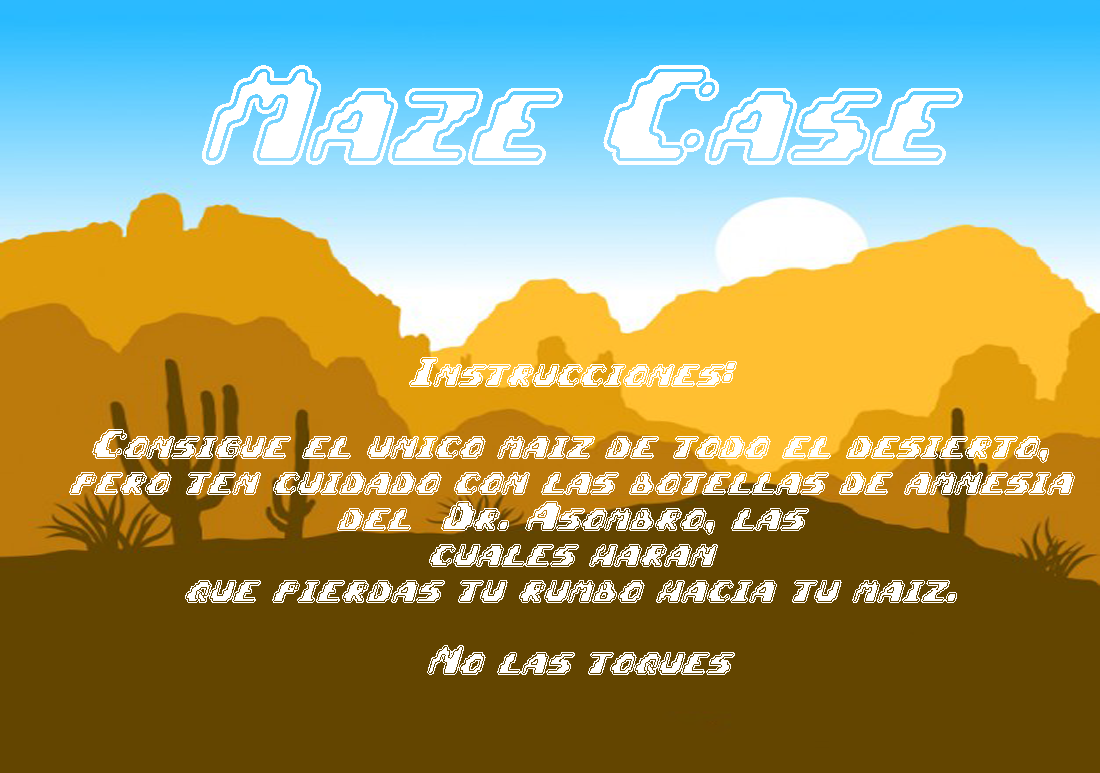
<style>
.page{position:relative;width:1100px;height:773px;background:#634500}
.page>*{position:absolute;margin:0}
.t1{font:100px "ZeroVelocityBRK";color:#ffffff}
.t2{font:30px "ZeroVelocityBRK";color:#ffffff}
</style>
<div class="page">
<p class="t1" style="left:202px;top:65px;width:761px;height:100px">Maze Case</p>
<p class="t2" style="left:69px;top:357px;width:1006px;height:318px;text-align:center">Instrucciones: <br><br>Consigue el unico maiz de todo el desierto, <br>pero ten cuidado con las botellas de amnesia <br>del  Dr. Asombro, las <br>cuales haran <br>que pierdas tu rumbo hacia tu maiz. <br><br>No las toques</p>
</div>
